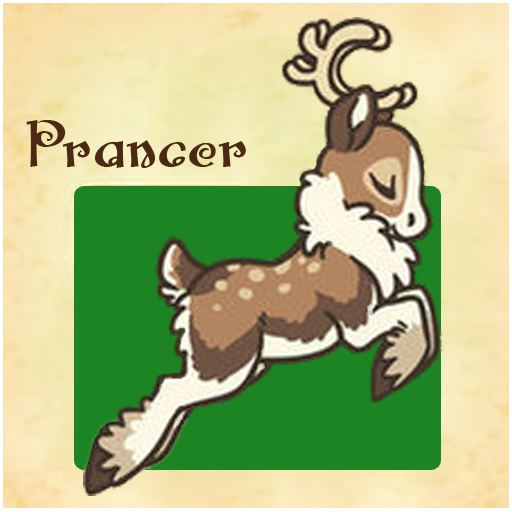
<style>
.page{position:relative;width:512px;height:512px;background:#1c8423}
.page>*{position:absolute;margin:0}
.t1{font:66.7px "SantasBigSecretBB";color:#4c2913}
</style>
<div class="page">
<p class="t1" style="left:26px;top:120px;width:220px;height:48px">Prancer</p>
</div>
